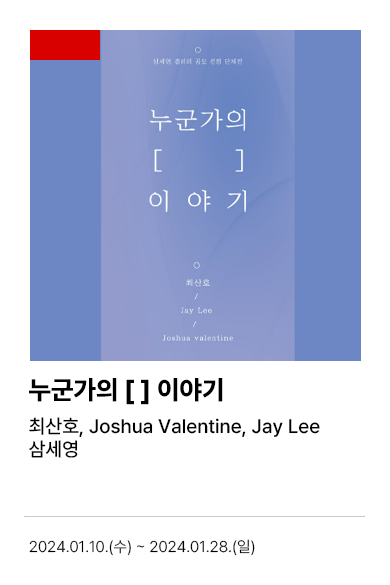
<style>
.page{position:relative;width:390px;height:585px;background:#ffffff}
.page>*{position:absolute;margin:0}
.t1{font:26px "PretendardVariable-ExtraBold";color:#000000}
.t2{font:19.5px "PretendardVariable-Medium";color:#000000}
.t3{font:15.5px "PretendardVariable-Light";color:#000000}
</style>
<div class="page">
<p class="t1" style="left:29px;top:378px;width:194px;height:27px">누군가의 [ ] 이야기</p>
<p class="t2" style="left:29px;top:417px;width:291px;height:21px">최산호, Joshua Valentine, Jay Lee</p>
<p class="t2" style="left:29px;top:440px;width:49px;height:18px">삼세영</p>
<p class="t3" style="left:29px;top:539px;width:226px;height:17px">2024.01.10.(수) ~ 2024.01.28.(일)</p>
</div>
